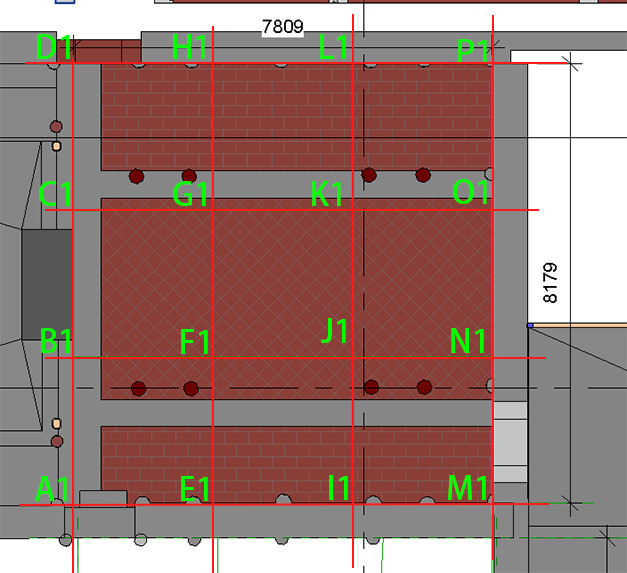
<style>
.page{position:relative;width:627px;height:573px}
.page>*{position:absolute;margin:0}
.t1{font:32px "AdobeFanHeitiStd-Bold";color:#06ff00}
</style>
<div class="page">
<p class="t1" style="left:37px;top:34px;width:33px;height:25px">D1</p>
<p class="t1" style="left:173px;top:34px;width:32px;height:25px">H1</p>
<p class="t1" style="left:320px;top:34px;width:26px;height:25px">L1</p>
<p class="t1" style="left:458px;top:39px;width:29px;height:25px">P1</p>
<p class="t1" style="left:39px;top:181px;width:31px;height:25px">C1</p>
<p class="t1" style="left:173px;top:181px;width:33px;height:25px">G1</p>
<p class="t1" style="left:312px;top:181px;width:29px;height:25px">K1</p>
<p class="t1" style="left:453px;top:179px;width:34px;height:25px">O1</p>
<p class="t1" style="left:321px;top:318px;width:25px;height:25px">J1</p>
<p class="t1" style="left:41px;top:328px;width:29px;height:25px">B1</p>
<p class="t1" style="left:181px;top:329px;width:27px;height:25px">F1</p>
<p class="t1" style="left:451px;top:328px;width:33px;height:25px">N1</p>
<p class="t1" style="left:35px;top:476px;width:32px;height:25px">A1</p>
<p class="t1" style="left:181px;top:476px;width:27px;height:25px">E1</p>
<p class="t1" style="left:329px;top:475px;width:19px;height:25px">I1</p>
<p class="t1" style="left:448px;top:475px;width:38px;height:25px">M1</p>
</div>
